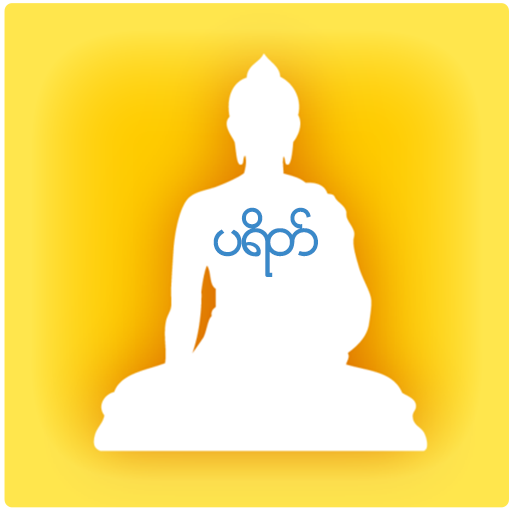
<style>
.page{position:relative;width:512px;height:512px;background:#ffffff}
.page>*{position:absolute;margin:0}
.t1{font:51.2px "MyanmarHub";letter-spacing:-0.06em;color:#3a89c9}
</style>
<div class="page">
<p class="t1" style="left:213px;top:207px;width:105px;height:70px">ပရိတ္</p>
</div>
